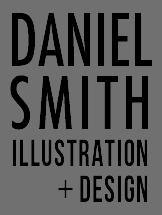
<style>
.page{position:relative;width:162px;height:215px;background:#707070}
.page>*{position:absolute;margin:0}
.t1{font:37.9px/37.5px "BebasNeue";letter-spacing:0.045em;color:#000000;scale:0.77 1}
.t2{font:70.4px/62.5px "Futura-CondensedMedium";color:#000000;scale:0.91 1}
.t3{font:70.4px/62.5px "Futura-CondensedMedium";letter-spacing:0.073em;color:#000000;scale:0.91 1}
.t4{font:37.9px/35.4px "BookAntiqua";letter-spacing:0.138em;color:#000000;scale:0.77 1}
.t5{font:37.9px/35.4px "BebasNeue";letter-spacing:0.045em;color:#000000;scale:0.77 1}
</style>
<div class="page">
<p class="t1" style="left:10px;top:12px;width:142px;height:191px;text-align:center"><span class="t2">DANIEL<br></span><span class="t3">SMITH<br></span>illustration<br> <span class="t4">+</span><span class="t5">Design</span></p>
</div>
